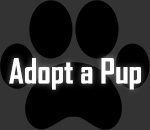
<style>
.page{position:relative;width:150px;height:130px;background:#000000}
.page>*{position:absolute;margin:0}
.t1{font:33.2px "AgencyFB-Bold";color:#ffffff}
</style>
<div class="page">
<p class="t1" style="left:9px;top:58px;width:132px;height:32px">Adopt a Pup</p>
</div>
